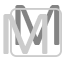
<style>
.page{position:relative;width:64px;height:64px;background:#ffffff}
.page>*{position:absolute;margin:0}
.t1{font:64px "Calibri";color:#848484}
</style>
<div class="page">
<p class="t1" style="left:15px;top:5px;width:45px;height:40px">M</p>
</div>
